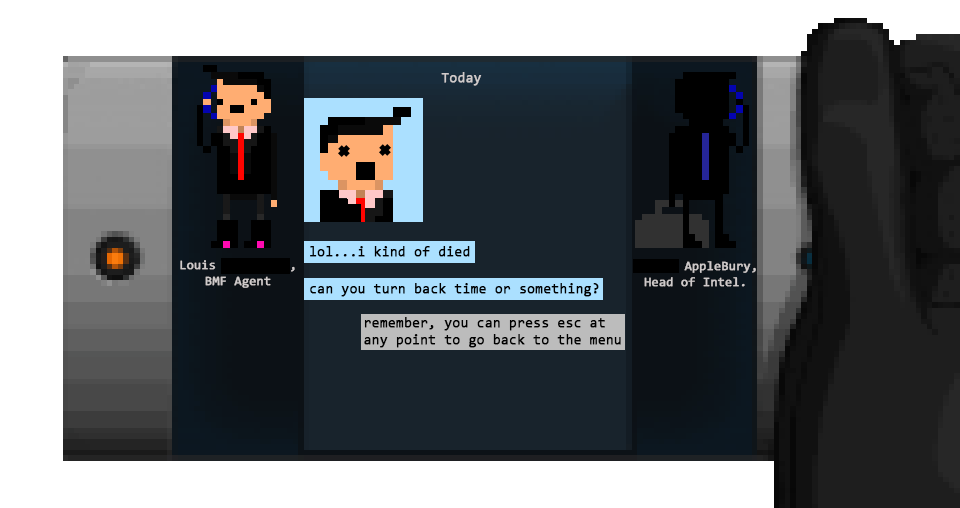
<style>
.page{position:relative;width:960px;height:508px;background:#ffffff}
.page>*{position:absolute;margin:0}
.t1{font:14px "Consolas";color:#cfcaca;font-weight:bold}
.t2{font:14px "Consolas";color:#000000;font-weight:bold}
.t3{font:12.8px "Consolas";font-weight:bold}
.t4{font:12.8px "Consolas";color:#cfcaca;font-weight:bold}
</style>
<div class="page">
<p class="t1" style="left:441px;top:72px;width:41px;height:14px">Today</p>
<p class="t2" style="left:310px;top:246px;width:160px;height:11px">lol...i kind of died</p>
<p class="t3" style="left:180px;top:260px;width:115px;height:28px;text-align:center">Louis AppleBury,<br>BMF Agent</p>
<p class="t4" style="left:634px;top:261px;width:122px;height:26px;text-align:center">Joness AppleBury,<br>Head of Intel.</p>
<p class="t2" style="left:310px;top:283px;width:289px;height:14px">can you turn back time or something?</p>
<p class="t2" style="left:364px;top:317px;width:257px;height:31px">remember, you can press esc at<br>any point to go back to the menu</p>
</div>
